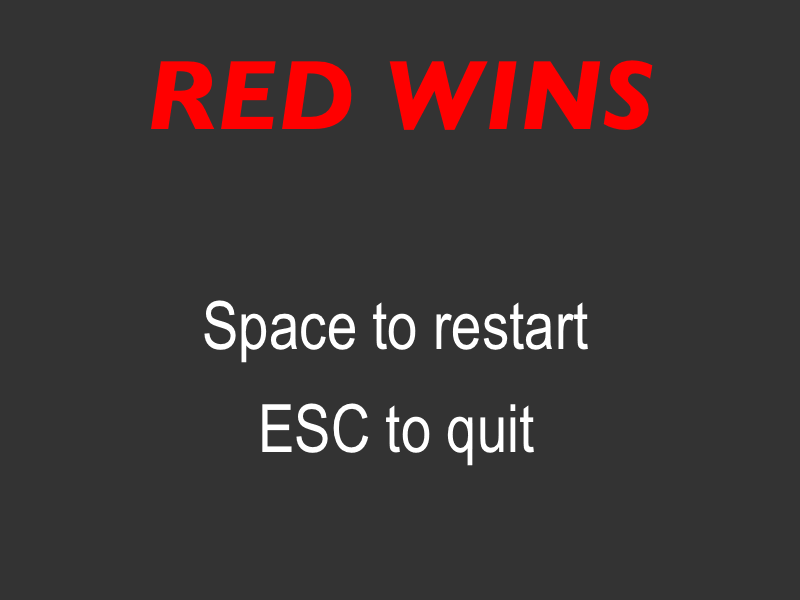
<style>
.page{position:relative;width:800px;height:600px;background:#333333}
.page>*{position:absolute;margin:0}
.t1{font:100px "GillSans-BoldItalic";color:#ff0000}
.t2{font:66.7px "ArialNarrow";color:#ffffff}
</style>
<div class="page">
<p class="t1" style="left:151px;top:60px;width:502px;height:70px">RED WINS</p>
<p class="t2" style="left:204px;top:300px;width:384px;height:63px">Space to restart</p>
<p class="t2" style="left:262px;top:403px;width:272px;height:63px">ESC to quit</p>
</div>
